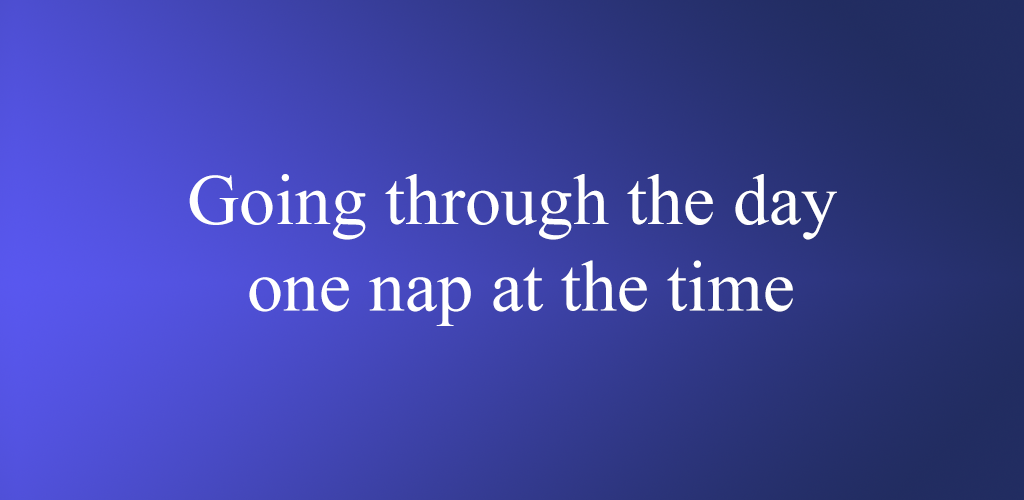
<style>
.page{position:relative;width:1024px;height:500px}
.page>*{position:absolute;margin:0}
.t1{font:72px "TimesNewRomanPSMT";color:#ffffff}
</style>
<div class="page">
<p class="t1" style="left:189px;top:174px;width:648px;height:152px;text-align:center">Going through the day <br>one nap at the time</p>
</div>
